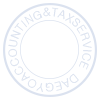
<style>
.page{position:relative;width:100px;height:100px;background:#ffffff}
.page>*{position:absolute;margin:0}
.t1{font:11.6px/24.3px "Gulim";color:#dbe2ef}
</style>
<div class="page">
<p class="t1" style="left:8px;top:7px;width:84px;height:85px;text-align:center">DAEGYOACCOUNTING&amp;TAXSERVICE</p>
</div>
